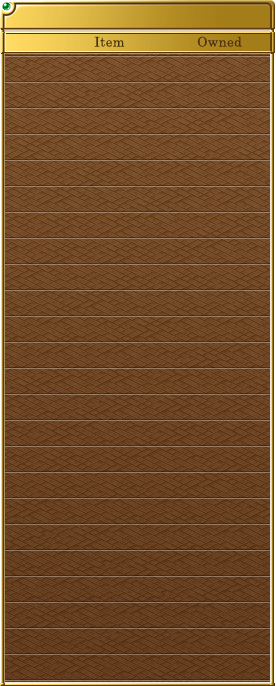
<style>
.page{position:relative;width:276px;height:686px}
.page>*{position:absolute;margin:0}
.t1{font:13.3px "CenturySchoolbook";letter-spacing:0.025em;color:#4b310f}
</style>
<div class="page">
<p class="t1" style="left:94px;top:36px;width:31px;height:11px">Item</p>
<p class="t1" style="left:197px;top:36px;width:45px;height:11px">Owned</p>
</div>
